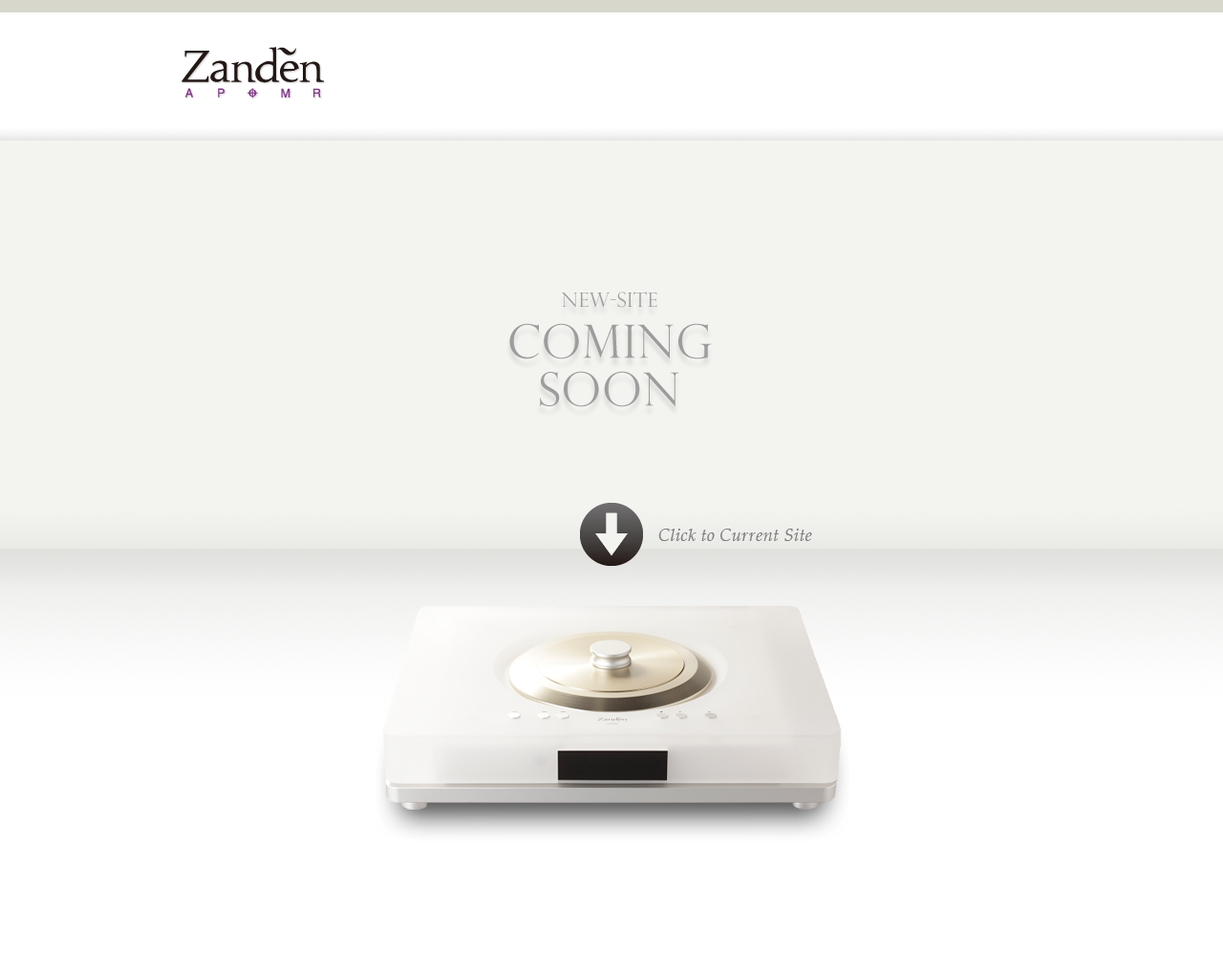
<style>
.page{position:relative;width:1223px;height:975px;background:#f3f4f0}
.page>*{position:absolute;margin:0}
.t1{font:20.1px/28.7px "PerpetuaTitlingMT-Light";letter-spacing:0.025em;color:#9d9d9d}
.t2{font:45.9px/47.8px "PerpetuaTitlingMT-Light";letter-spacing:0.025em;color:#9d9d9d}
.t3{font:45.9px/64px "PerpetuaTitlingMT-Light";letter-spacing:0.025em;color:#9d9d9d}
.t4{font:17.2px "Palatino-Italic";letter-spacing:0.025em;color:#7f7f7f}
</style>
<div class="page">
<p class="t1" style="left:509px;top:291px;width:203px;height:116px;text-align:center">new-site<br><span class="t2">coming<br></span><span class="t3">soon</span></p>
<p class="t4" style="left:658px;top:528px;width:154px;height:13px">Click to Current Site</p>
</div>
